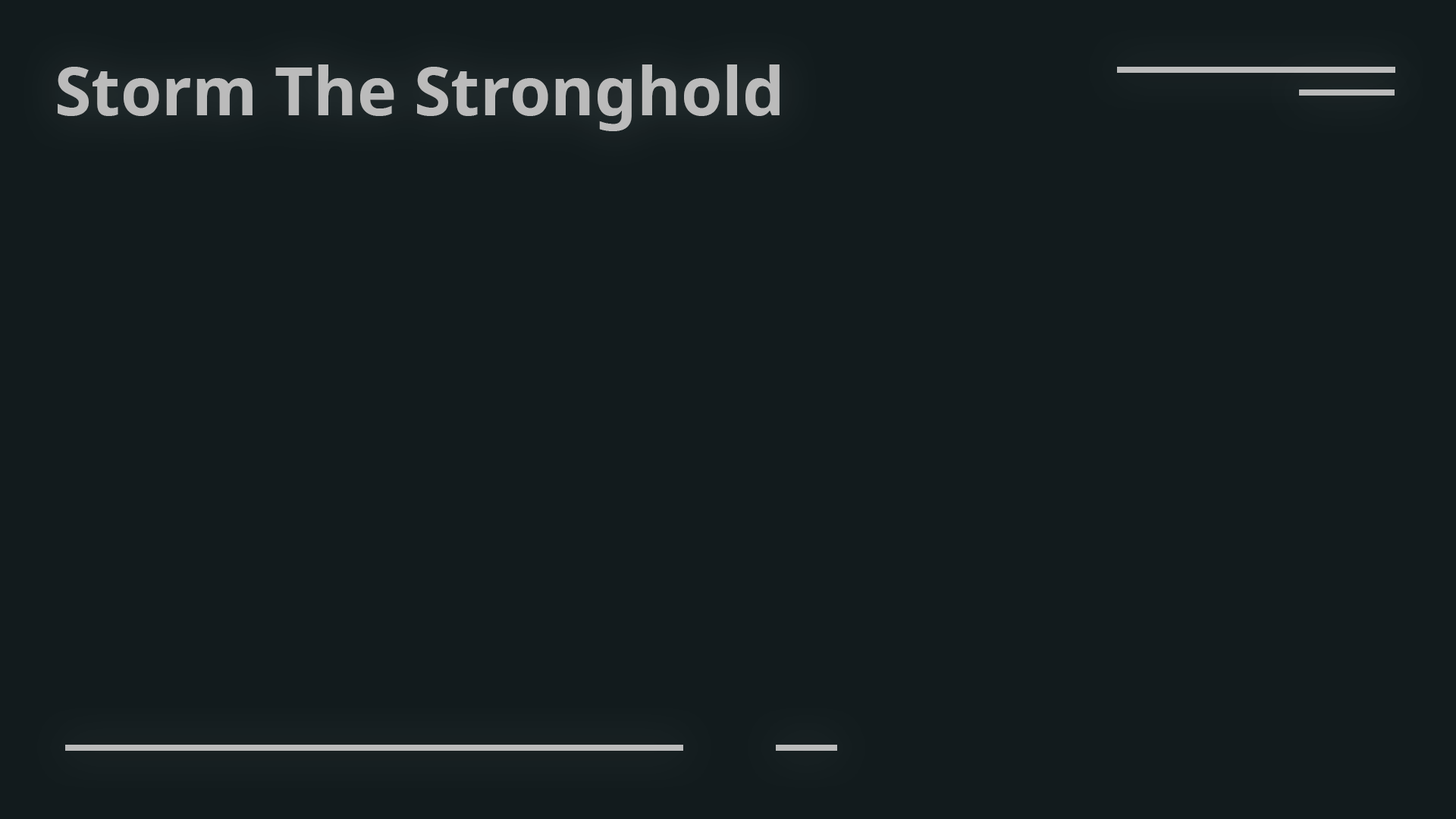
<style>
.page{position:relative;width:1456px;height:819px;background:#121b1d}
.page>*{position:absolute;margin:0}
.t1{font:66.7px "NotoSans-Bold";color:#bbbbbb}
</style>
<div class="page">
<p class="t1" style="left:58px;top:64px;width:722px;height:67px">Storm The Stronghold</p>
</div>
